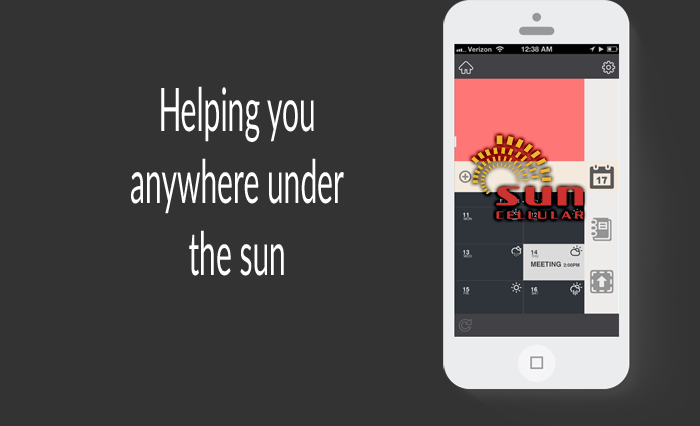
<style>
.page{position:relative;width:700px;height:426px;background:#333333}
.page>*{position:absolute;margin:0}
.t1{font:60.1px "Lato-Regular";color:#ffffff;scale:0.5 1}
</style>
<div class="page">
<p class="t1" style="left:131px;top:86px;width:213px;height:190px;text-align:center">Helping you <br>anywhere under <br>the sun</p>
</div>
